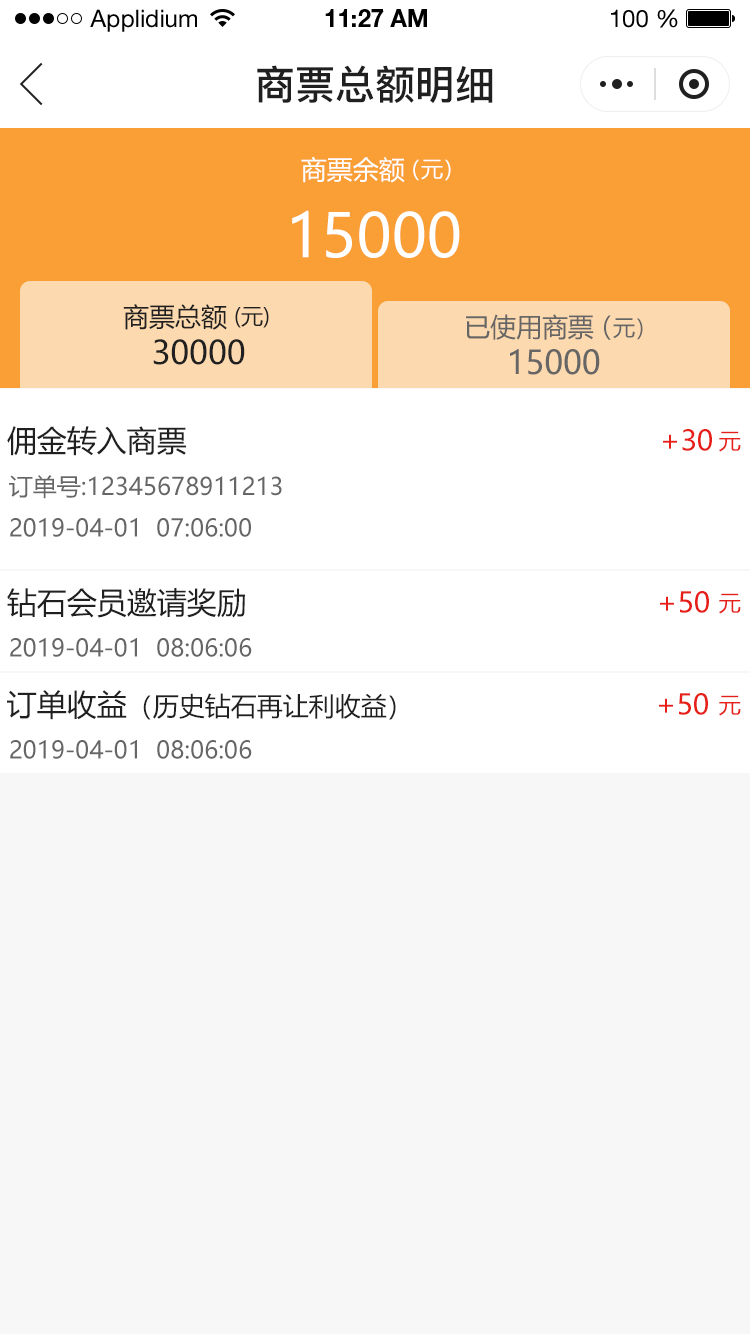
<style>
.page{position:relative;width:750px;height:1334px;background:#f7f7f7}
.page>*{position:absolute;margin:0}
.t1{font:24px "HelveticaNeueLTStd-Roman";color:#000000}
.t2{font:24px "HelveticaNeueLTStd-Bd";color:#000000}
.t3{font:40px "PingFang-SC-Bold";color:#202020;text-transform:uppercase}
.t4{font:26px "MicrosoftYaHei";color:#ffffff;text-transform:uppercase}
.t5{font:22px "MicrosoftYaHei";color:#ffffff;text-transform:uppercase}
.t6{font:60px "MicrosoftYaHei";color:#ffffff;text-transform:uppercase}
.t7{font:26px "MicrosoftYaHei";color:#202020;text-transform:uppercase}
.t8{font:22px "MicrosoftYaHei";color:#202020;text-transform:uppercase}
.t9{font:26.2px "MicrosoftYaHei";color:#666666;text-transform:uppercase}
.t10{font:22.2px "MicrosoftYaHei";color:#666666;text-transform:uppercase}
.t11{font:32px "MicrosoftYaHei";color:#202020;text-transform:uppercase}
.t12{font:32.2px "MicrosoftYaHei";color:#666666;text-transform:uppercase}
.t13{font:30px "MicrosoftYaHei";color:#202020;text-transform:uppercase}
.t14{font:28px "MicrosoftYaHei";color:#e61f18;text-transform:uppercase}
.t15{font:22px "MicrosoftYaHei";color:#e61f18;text-transform:uppercase}
.t16{font:24px "MicrosoftYaHei";color:#666666;text-transform:uppercase}
</style>
<div class="page">
<p class="t1" style="left:90px;top:9px;width:107px;height:23px">Applidium</p>
<p class="t2" style="left:325px;top:9px;width:102px;height:18px">11:27 AM</p>
<p class="t1" style="left:611px;top:9px;width:67px;height:19px">100 %</p>
<p class="t3" style="left:257px;top:65px;width:236px;height:38px">商票总额明细</p>
<p class="t4" style="left:301px;top:156px;width:104px;height:27px">商票余额</p>
<p class="t5" style="left:413px;top:159px;width:38px;height:22px">（元）</p>
<p class="t6" style="left:292px;top:210px;width:168px;height:48px">15000</p>
<p class="t7" style="left:123px;top:304px;width:104px;height:26px">商票总额</p>
<p class="t8" style="left:235px;top:307px;width:34px;height:21px">(元)</p>
<p class="t9" style="left:466px;top:314px;width:128px;height:26px">已使用商票</p>
<p class="t10" style="left:604px;top:315px;width:39px;height:25px"><span class="t9">（</span>元）</p>
<p class="t11" style="left:153px;top:339px;width:92px;height:26px">30000</p>
<p class="t12" style="left:510px;top:349px;width:90px;height:26px">15000</p>
<p class="t13" style="left:7px;top:426px;width:179px;height:30px">佣金转入商票</p>
<p class="t14" style="left:663px;top:429px;width:49px;height:22px">+30</p>
<p class="t15" style="left:719px;top:431px;width:22px;height:21px">元</p>
<p class="t16" style="left:9px;top:475px;width:273px;height:24px">订单号:12345678911213</p>
<p class="t16" style="left:10px;top:518px;width:241px;height:19px">2019-04-01  07:06:00</p>
<p class="t13" style="left:7px;top:588px;width:238px;height:30px">钻石会员邀请奖励</p>
<p class="t14" style="left:660px;top:591px;width:49px;height:22px">+50</p>
<p class="t15" style="left:719px;top:593px;width:22px;height:21px">元</p>
<p class="t16" style="left:10px;top:638px;width:242px;height:19px">2019-04-01  08:06:06</p>
<p class="t7" style="left:7px;top:690px;width:389px;height:30px"><span class="t13">订单收益</span>（历史钻石再让利收益）</p>
<p class="t14" style="left:659px;top:693px;width:49px;height:22px">+50</p>
<p class="t15" style="left:719px;top:695px;width:22px;height:21px">元</p>
<p class="t16" style="left:10px;top:740px;width:242px;height:19px">2019-04-01  08:06:06</p>
</div>
